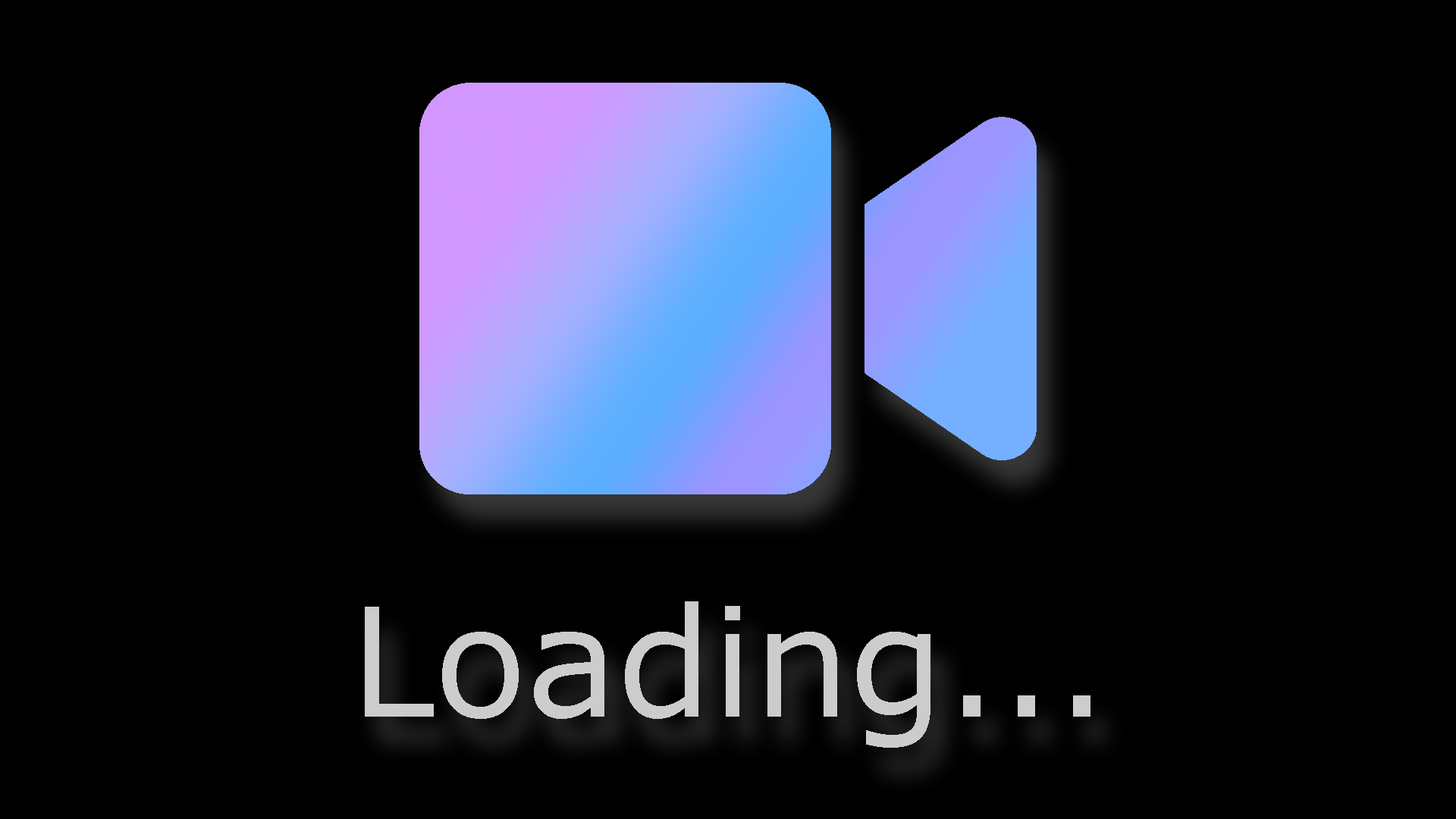
<style>
.page{position:relative;width:1456px;height:819px;background:#000000}
.page>*{position:absolute;margin:0}
.t1{font:151.7px "Verdana";color:#cccccc}
</style>
<div class="page">
<p class="t1" style="left:365px;top:601px;width:725px;height:147px">Loading...</p>
</div>
